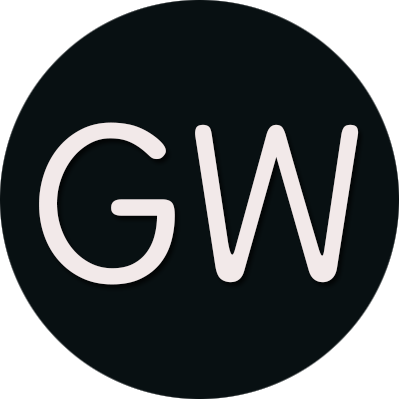
<style>
.page{position:relative;width:400px;height:400px;background:#081012}
.page>*{position:absolute;margin:0}
.t1{font:223.2px "STYuanti-SC-Regular";color:#f2e9e9}
</style>
<div class="page">
<p class="t1" style="left:39px;top:122px;width:320px;height:163px">GW</p>
</div>
